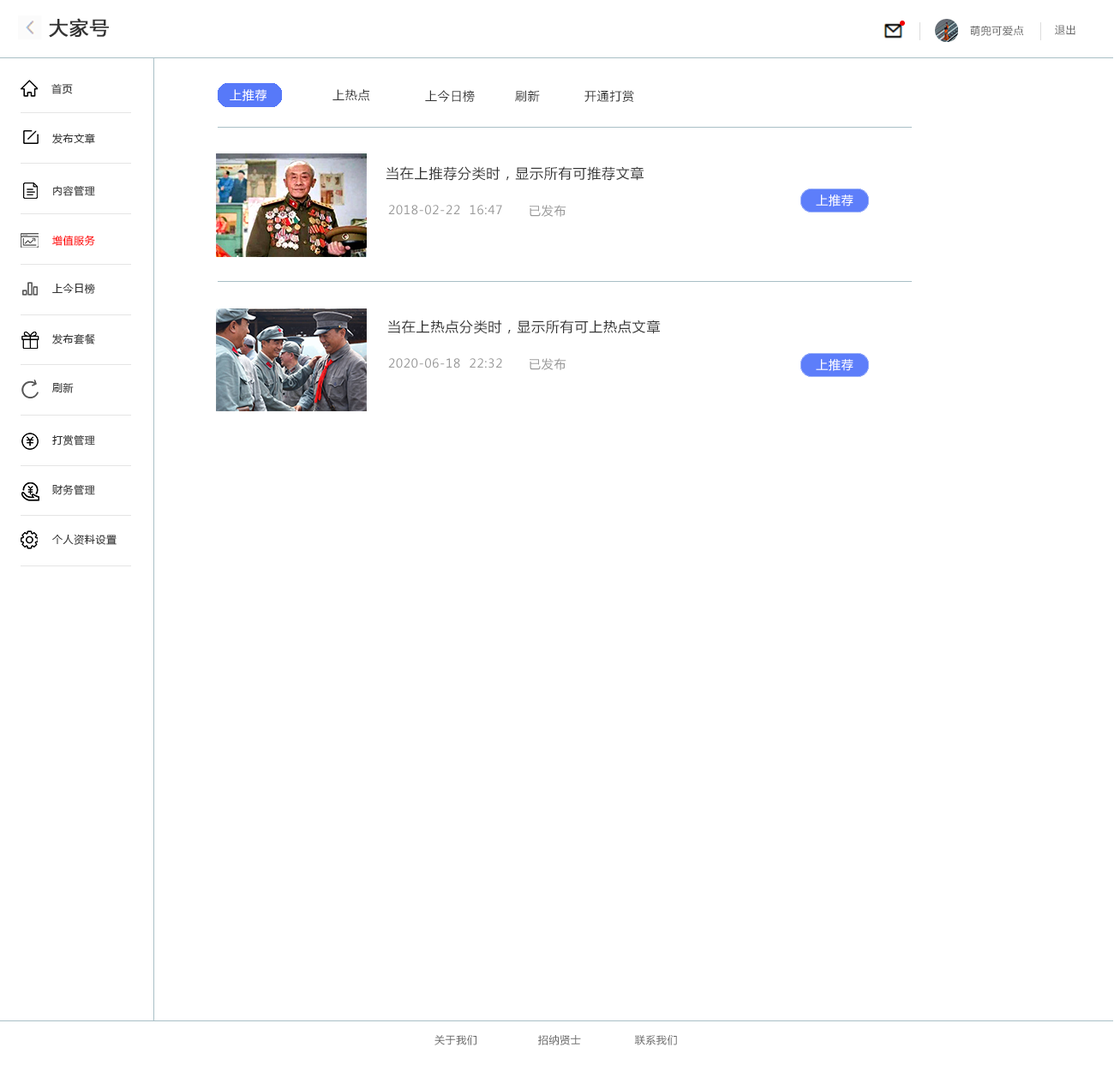
<style>
.page{position:relative;width:1114px;height:1071px;background:#ffffff}
.page>*{position:absolute;margin:0}
.t1{font:18.8px "MicrosoftYaHei";letter-spacing:0.05em;color:#333333;font-weight:bold}
.t2{font:10.3px "MicrosoftYaHei";letter-spacing:0.05em;color:#666666}
.t3{font:10.3px "MicrosoftYaHei";letter-spacing:0.05em;color:#333333}
.t4{font:12px "MicrosoftYaHei";letter-spacing:0.05em;color:#ffffff}
.t5{font:12px "MicrosoftYaHei";letter-spacing:0.05em;color:#333333}
.t6{font:13.7px "MicrosoftYaHei";letter-spacing:0.05em;color:#333333}
.t7{font:12px "MicrosoftYaHei";letter-spacing:0.05em;color:#999999}
.t8{font:10.3px "MicrosoftYaHei";letter-spacing:0.05em;color:#ff0000}
</style>
<div class="page">
<p class="t1" style="left:49px;top:18px;width:60px;height:20px">大家号</p>
<p class="t2" style="left:970px;top:26px;width:54px;height:10px">萌兜可爱点</p>
<p class="t2" style="left:1055px;top:25px;width:20px;height:10px">退出</p>
<p class="t3" style="left:51px;top:83px;width:22px;height:11px">首页</p>
<p class="t4" style="left:230px;top:89px;width:36px;height:12px">上推荐</p>
<p class="t5" style="left:332px;top:89px;width:37px;height:12px">上热点</p>
<p class="t5" style="left:425px;top:90px;width:50px;height:12px">上今日榜</p>
<p class="t5" style="left:515px;top:90px;width:25px;height:12px">刷新</p>
<p class="t5" style="left:584px;top:90px;width:50px;height:12px">开通打赏</p>
<p class="t3" style="left:52px;top:133px;width:43px;height:11px">发布文章</p>
<p class="t6" style="left:385px;top:166px;width:259px;height:15px">当在上推荐分类时，显示所有可推荐文章</p>
<p class="t3" style="left:53px;top:185px;width:42px;height:11px">内容管理</p>
<p class="t4" style="left:816px;top:194px;width:37px;height:12px">上推荐</p>
<p class="t7" style="left:388px;top:205px;width:114px;height:10px">2018-02-22  16:47</p>
<p class="t7" style="left:529px;top:205px;width:37px;height:12px">已发布</p>
<p class="t8" style="left:52px;top:235px;width:43px;height:11px">增值服务</p>
<p class="t3" style="left:52px;top:283px;width:43px;height:11px">上今日榜</p>
<p class="t6" style="left:387px;top:320px;width:273px;height:14px">当在上热点分类时，显示所有可上热点文章</p>
<p class="t3" style="left:52px;top:333px;width:43px;height:11px">发布套餐</p>
<p class="t7" style="left:388px;top:358px;width:114px;height:10px">2020-06-18  22:32</p>
<p class="t7" style="left:529px;top:358px;width:37px;height:12px">已发布</p>
<p class="t4" style="left:816px;top:359px;width:37px;height:12px">上推荐</p>
<p class="t3" style="left:52px;top:383px;width:22px;height:10px">刷新</p>
<p class="t3" style="left:52px;top:434px;width:43px;height:11px">打赏管理</p>
<p class="t3" style="left:52px;top:484px;width:43px;height:11px">财务管理</p>
<p class="t3" style="left:52px;top:534px;width:65px;height:11px">个人资料设置</p>
<p class="t2" style="left:434px;top:1035px;width:243px;height:10px">关于我们                 招纳贤士               联系我们</p>
</div>
